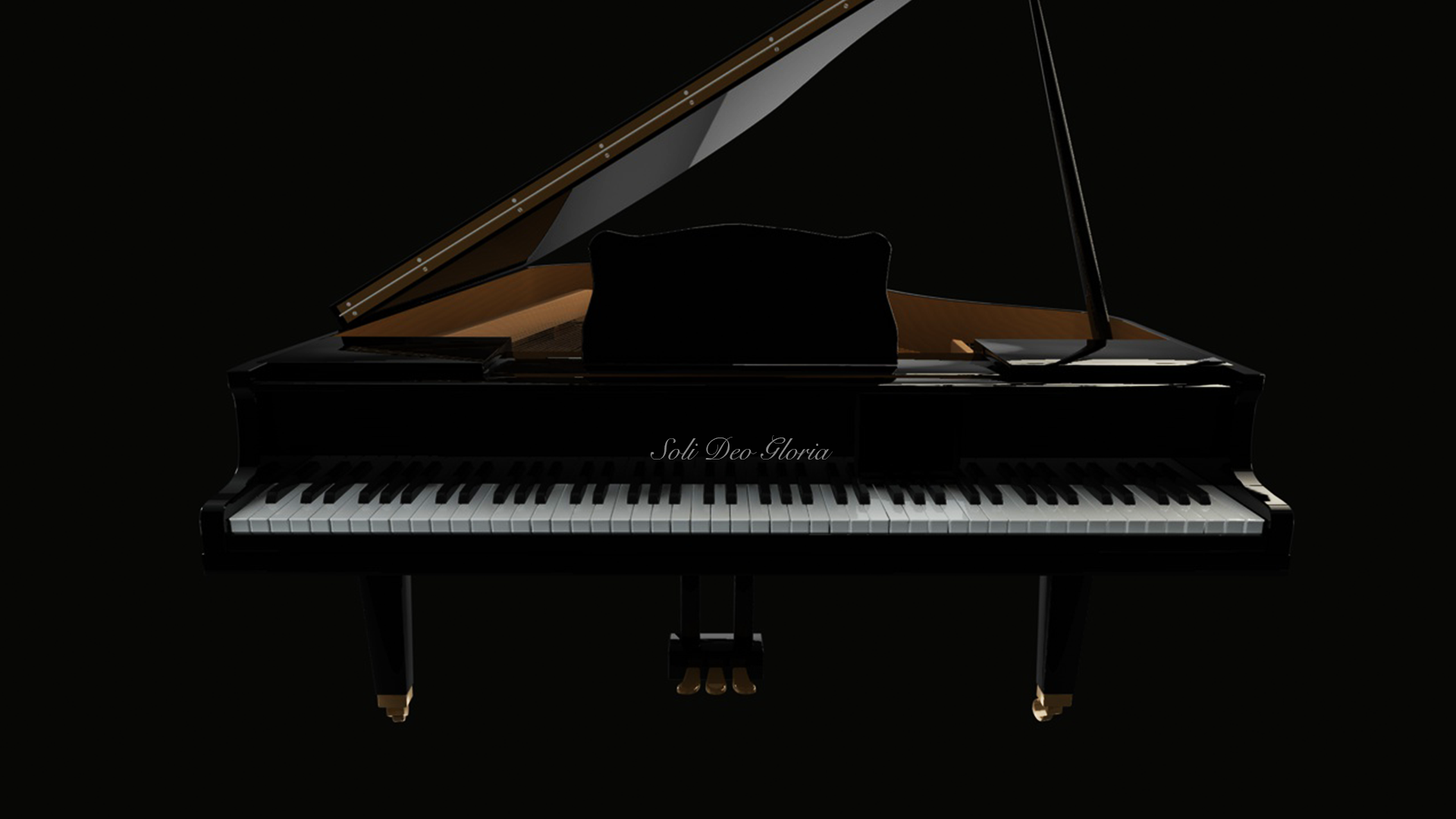
<style>
.page{position:relative;width:1456px;height:819px;background:#070705}
.page>*{position:absolute;margin:0}
.t1{font:30.2px "SnellRoundhand";color:#878787}
</style>
<div class="page">
<p class="t1" style="left:650px;top:435px;width:183px;height:25px">Soli Deo Gloria</p>
</div>
